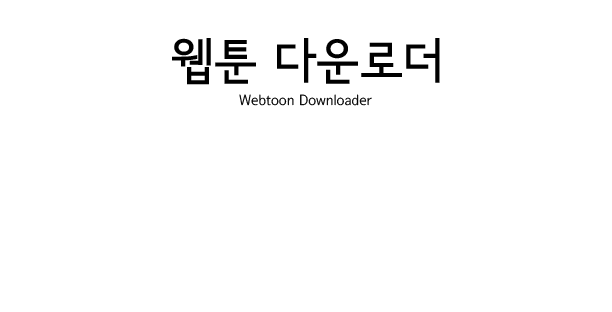
<style>
.page{position:relative;width:612px;height:312px;background:#ffffff}
.page>*{position:absolute;margin:0}
.t1{font:49.4px "SeoulNamsanB";color:#000000}
.t2{font:14.4px "SeoulNamsanL";color:#000000}
</style>
<div class="page">
<p class="t1" style="left:172px;top:38px;width:268px;height:47px">웹툰 다운로더</p>
<p class="t2" style="left:239px;top:94px;width:133px;height:12px">Webtoon Downloader</p>
</div>
